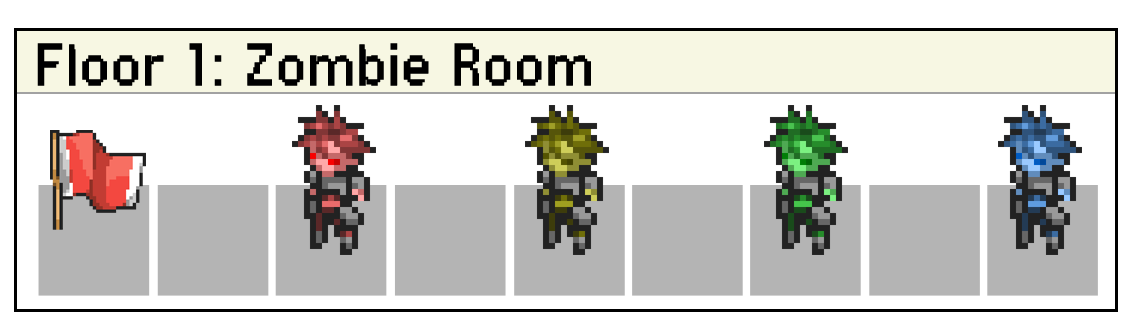
<style>
.page{position:relative;width:1130px;height:330px;background:#ffffff}
.page>*{position:absolute;margin:0}
.t1{font:48px "PFTempestaSevenCondensed";color:#000000;font-weight:bold}
</style>
<div class="page">
<p class="t1" style="left:37px;top:43px;width:554px;height:43px">Floor 1: Zombie Room</p>
</div>
